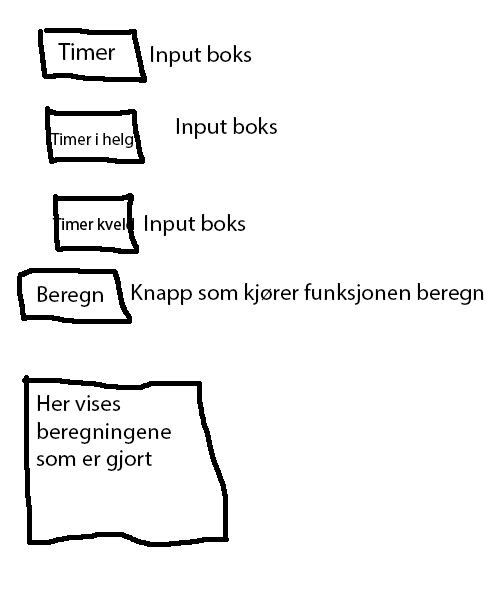
<style>
.page{position:relative;width:500px;height:600px;background:#ffffff}
.page>*{position:absolute;margin:0}
.t1{font:24px "MyriadPro-Regular";color:#000000}
.t2{font:23px "MyriadPro-Regular";color:#000000}
.t3{font:17px "MyriadPro-Regular";color:#000000}
</style>
<div class="page">
<p class="t1" style="left:58px;top:43px;width:57px;height:17px">Timer</p>
<p class="t2" style="left:151px;top:45px;width:101px;height:22px">Input boks</p>
<p class="t2" style="left:176px;top:117px;width:101px;height:22px">Input boks</p>
<p class="t3" style="left:50px;top:133px;width:83px;height:15px">Timer i helg</p>
<p class="t2" style="left:145px;top:214px;width:101px;height:22px">Input boks</p>
<p class="t2" style="left:37px;top:286px;width:66px;height:21px">Beregn</p>
<p class="t2" style="left:131px;top:283px;width:353px;height:22px">Knapp som kjører funksjonen beregn</p>
<p class="t2" style="left:36px;top:395px;width:135px;height:76px">Her vises <br>beregningene <br>som er gjort</p>
</div>
